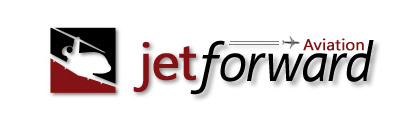
<style>
.page{position:relative;width:400px;height:120px;background:#ffffff}
.page>*{position:absolute;margin:0}
.t1{font:56px "Ligurino-Italic";color:#000000;scale:1.05 1}
.t2{font:56px "Corbel-Italic";color:#000000;scale:1.05 1}
.t3{font:15.2px "MalgunGothicRegular";color:#841114;font-weight:bold;scale:1.05 1}
.t4{font:49.4px "MalgunGothicRegular";letter-spacing:-0.04em;color:#841114;font-weight:bold;scale:1.05 1}
</style>
<div class="page">
<p class="t1" style="left:190px;top:40px;width:184px;height:55px"><span class="t2">f</span>orward</p>
<p class="t3" style="left:303px;top:38px;width:61px;height:13px">Aviation</p>
<p class="t4" style="left:133px;top:42px;width:63px;height:50px">jet</p>
</div>
